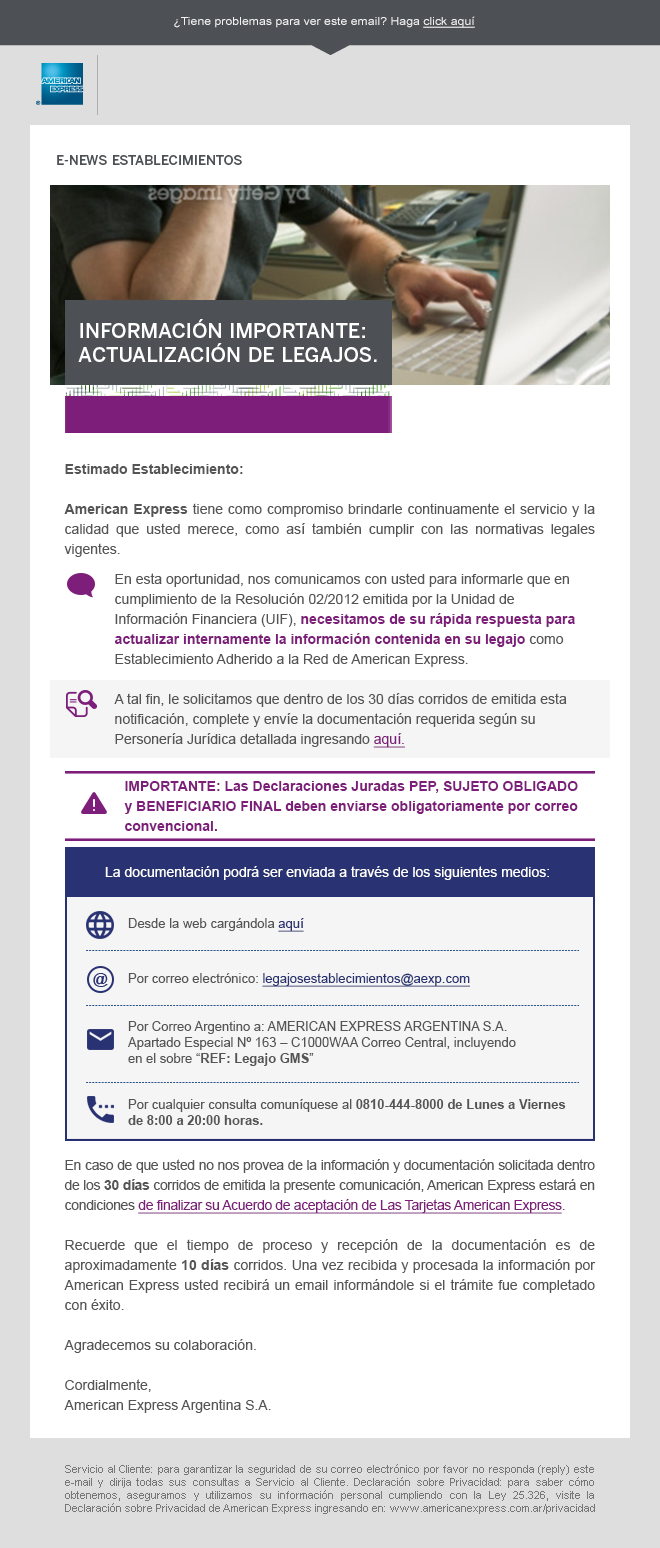
<style>
.page{position:relative;width:660px;height:1548px;background:#ffffff}
.page>*{position:absolute;margin:0}
.t1{font:11px "ArialMT";color:#f2f2f2;scale:1.12 1}
.t2{font:11px "ArialMT";color:#f2f2f2;text-decoration:underline;scale:1.12 1}
.t3{font:13.1px "BentonSans-Medium";color:#4d5155;text-transform:uppercase}
.t4{font:20px "BentonSans-Medium";color:#ffffff;text-transform:uppercase}
.t5{font:14px/20px "ArialMT";color:#555555}
.t6{font:14px/20px "Arial-BoldMT";color:#555555}
.t7{font:14px/30px "ArialMT";color:#555555}
.t8{font:14px/20px "Arial-BoldMT";color:#7d1e7a}
.t9{font:14px/20px "ArialMT";color:#7d1e7a;text-decoration:underline}
.t10{font:14px "ArialMT";color:#ffffff}
.t11{font:13px "ArialMT";color:#555555}
.t12{font:13px/30px "ArialMT";color:#293272;text-decoration:underline}
.t13{font:13px/20px "ArialMT";color:#555555}
.t14{font:13px/35px "ArialMT";color:#555555}
.t15{font:13px/35px "ArialMT";color:#293272;text-decoration:underline}
.t16{font:13px "Arial-BoldMT";color:#555555}
.t17{font:14px/20px "ArialMT";letter-spacing:-0.025em;color:#555555}
.t18{font:14px/20px "Arial-BoldMT";letter-spacing:-0.025em;color:#555555}
.t19{font:14px/20px "ArialMT";letter-spacing:-0.025em;color:#7d1e7a;text-decoration:underline}
.t20{font:11px "ArialMT";color:#777777}
</style>
<div class="page">
<p class="t1" style="left:174px;top:16px;width:301px;height:12px">¿Tiene problemas para ver este email? Haga <span class="t2">click aquí</span></p>
<p class="t3" style="left:57px;top:155px;width:185px;height:10px">E-News Establecimientos</p>
<p class="t4" style="left:78px;top:319px;width:299px;height:43px">Información importante: <br>Actualización de Legajos.</p>
<p class="t5" style="left:64px;top:464px;width:531px;height:284px;text-align:justify"><span class="t6">Estimado Establecimiento:<br><br>American Express</span> tiene como compromiso brindarle continuamente el servicio y la calidad que usted merece, como así también cumplir con las normativas legales vigentes.<br><span class="t7">En esta oportunidad, nos comunicamos con usted para informarle que en<br></span>cumplimiento de la Resolución 02/2012 emitida por la Unidad de<br>Información Financiera (UIF), <span class="t8">necesitamos de su rápida respuesta para<br>actualizar internamente la información contenida en su legajo</span> como <br>Establecimiento Adherido a la Red de American Express.<br><br>A tal fin, le solicitamos que dentro de los 30 días corridos de emitida esta    <br>notificación, complete y envíe la documentación requerida según su <br>Personería Jurídica detallada ingresando <span class="t9">aquí.</span></p>
<p class="t8" style="left:124px;top:781px;width:454px;height:50px">IMPORTANTE: Las Declaraciones Juradas PEP, SUJETO OBLIGADO<br>y BENEFICIARIO FINAL deben enviarse obligatoriamente por correo <br>convencional.</p>
<p class="t10" style="left:105px;top:866px;width:444px;height:14px">La documentación podrá ser enviada a través de los siguientes medios:</p>
<p class="t11" style="left:128px;top:918px;width:438px;height:207px">Desde la web cargándola <span class="t12">aquí<br><br></span><span class="t13">Por co</span><span class="t14">rreo electrónico: </span><span class="t15">legajosestablecimientos@aexp.com<br><br></span><span class="t13">Por Correo Argentino a: AMERICAN EXPRESS ARGENTINA S.A.<br></span>Apartado Especial Nº 163 – C1000WAA Correo Central, incluyendo<br>en el sobre “<span class="t16">REF: Legajo GMS</span>”<br><br><br>Por cualquier consulta comuníquese al <span class="t16">0810-444-8000 de Lunes a Viernes<br>de 8:00 a 20:00 horas.</span></p>
<p class="t5" style="left:64px;top:1159px;width:532px;height:254px;text-align:justify"><span class="t17">En caso de que usted no nos provea de la información y documentación solicitada dentro de los </span><span class="t18">30 días</span><span class="t17"> corridos de emitida la presente comunicación, American Express estará en condiciones </span><span class="t19">de finalizar su Acuerdo de aceptación de Las Tarjetas American Express</span><span class="t17">. <br></span><br>Recuerde que el tiempo de proceso y recepción de la documentación es de aproximadamente <span class="t6">10 días</span> corridos. Una vez recibida y procesada la información por American Express usted recibirá un email informándole si el trámite fue completado con éxito.<br><br>Agradecemos su colaboración.<br><br>Cordialmente,<br>American Express Argentina S.A.</p>
<p class="t20" style="left:65px;top:1464px;width:530px;height:50px;text-align:justify">Servicio al Cliente: para garantizar la seguridad de su correo electrónico por favor no responda (reply) este e-mail y dirija todas sus consultas a Servicio al Cliente. Declaración sobre Privacidad: para saber cómo obtenemos, aseguramos y utilizamos su información personal cumpliendo con la Ley 25.326, visite la Declaración sobre Privacidad de American Express ingresando en: www.americanexpress.com.ar/privacidad</p>
</div>
